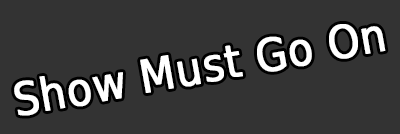
<style>
.page{position:relative;width:400px;height:134px;background:#333333}
.page>*{position:absolute;margin:0}
.t1{font:45.3px "DejaVuSansCondensed";color:#ffffff;font-weight:bold}
</style>
<div class="page">
<p class="t1" style="left:14px;top:24px;width:372px;height:92px;rotate:-10deg">Show Must Go On</p>
</div>
